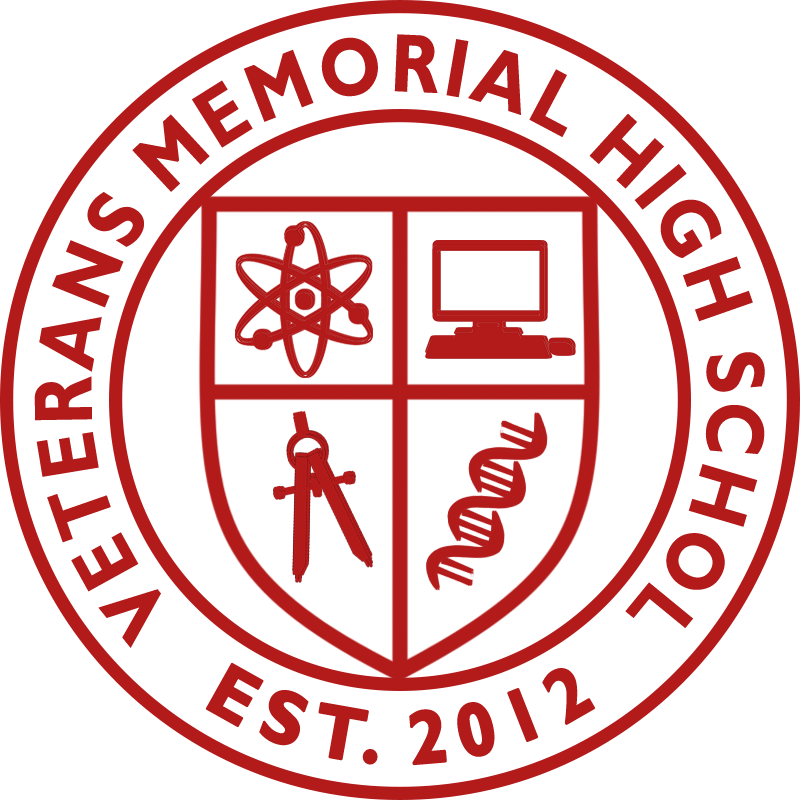
<style>
.page{position:relative;width:800px;height:800px;background:#ffffff}
.page>*{position:absolute;margin:0}
.t1{font:83.1px/86.8px "GillSansMT-Bold";letter-spacing:0.015em;color:#b31b1b;scale:0.86 1}
.t2{font:76px "GillSansMT-Bold";letter-spacing:0.015em;color:#b31b1b;font-weight:bold;scale:0.94 1}
</style>
<div class="page">
<p class="t1" style="left:34px;top:34px;width:731px;height:614px;text-align:center">VETERANS MEMORIAL HIGH SCHOL</p>
<p class="t2" style="left:205px;top:662px;width:390px;height:104px">EST. 2012</p>
</div>
